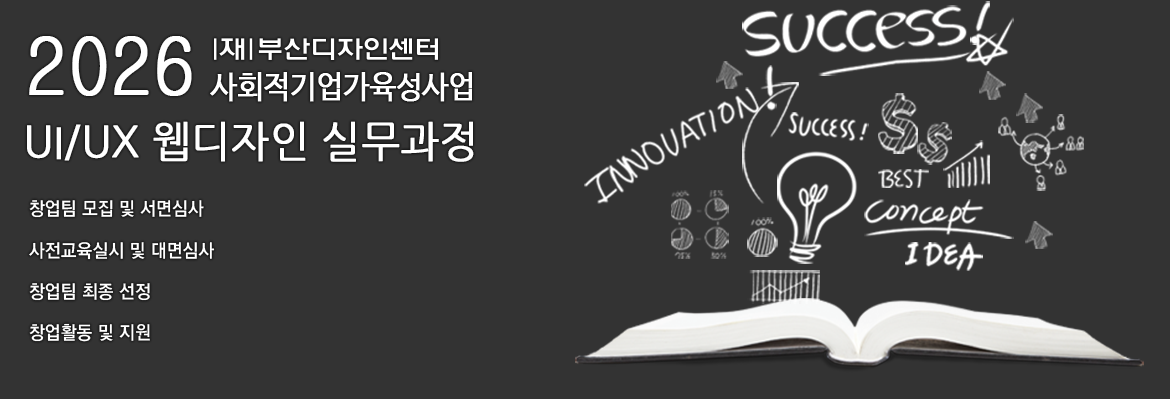
<style>
.page{position:relative;width:1170px;height:399px;background:#333333}
.page>*{position:absolute;margin:0}
.t1{font:78.7px "Gulim";color:#ffffff;text-transform:uppercase;font-weight:bold;scale:0.9 1}
.t2{font:31.8px "NanumBarunGothic";color:#ffffff;text-transform:uppercase;font-weight:bold;scale:0.9 1}
.t3{font:42.8px "NanumGothic";color:#ffffff;text-transform:uppercase;font-weight:bold;scale:0.95 1}
.t4{font:18.6px "YGO540";color:#ffffff;text-transform:uppercase;scale:0.95 1}
</style>
<div class="page">
<p class="t1" style="left:29px;top:36px;width:163px;height:60px">2026</p>
<p class="t2" style="left:210px;top:72px;width:262px;height:30px">사회적기업가육성사업</p>
<p class="t3" style="left:27px;top:121px;width:447px;height:41px">UI/UX 웹디자인 실무과정</p>
<p class="t4" style="left:29px;top:200px;width:175px;height:18px">창업팀 모집 및 서면심사</p>
<p class="t4" style="left:29px;top:242px;width:186px;height:18px">사전교육실시 및 대면심사</p>
<p class="t4" style="left:29px;top:283px;width:121px;height:18px">창업팀 최종 선정</p>
<p class="t4" style="left:29px;top:323px;width:121px;height:19px">창업활동 및 지원</p>
</div>
